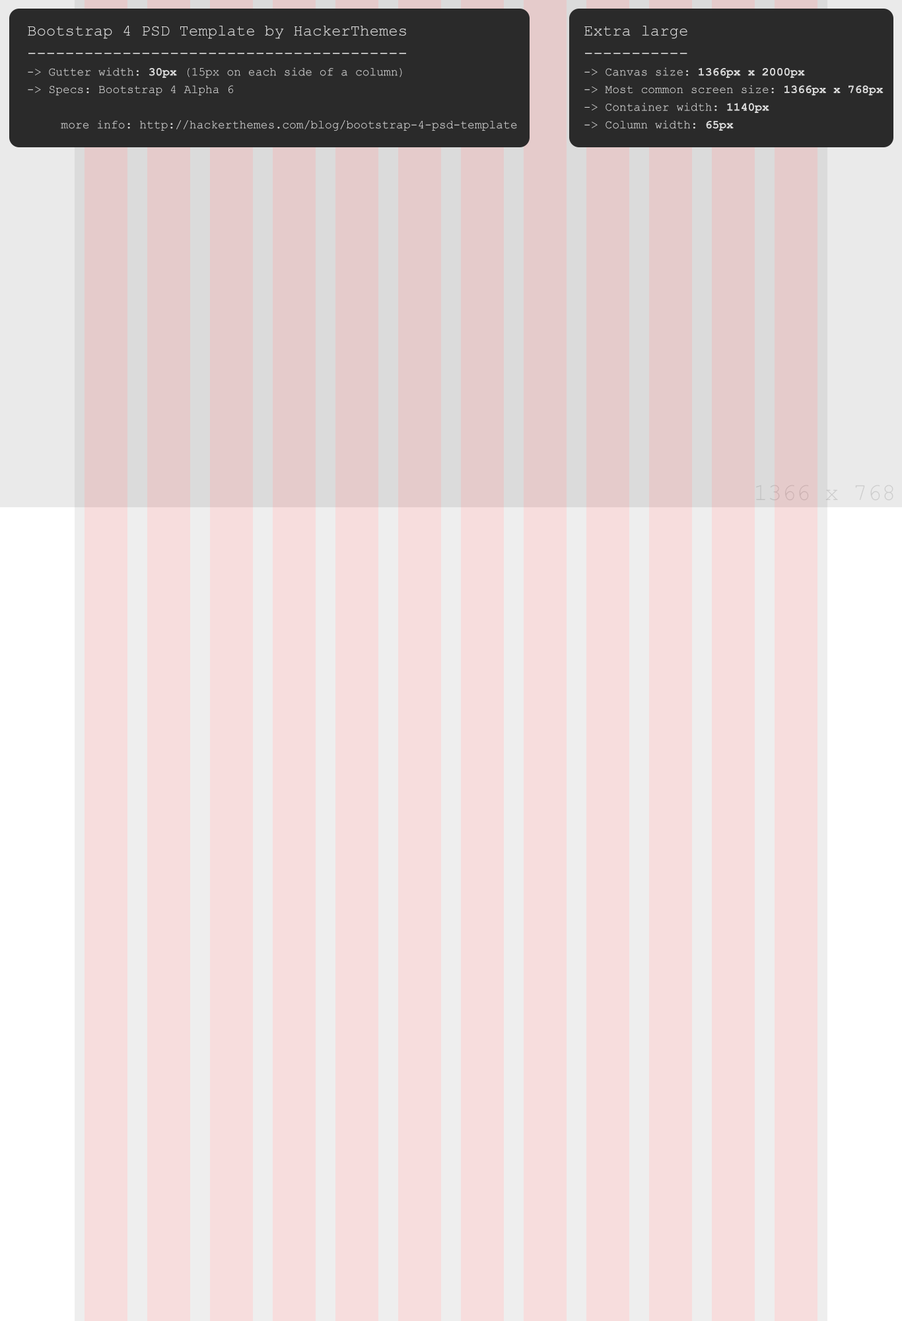
<style>
.page{position:relative;width:902px;height:1321px;background:#f7dddd}
.page>*{position:absolute;margin:0}
.t1{font:11.9px "CourierNewPSMT";color:#dedede}
.t2{font:15.9px "CourierNewPSMT";color:#dedede}
.t3{font:11.9px "CourierNewPS-BoldMT";color:#dedede}
.t4{font:23.8px "CourierNewPSMT"}
</style>
<div class="page">
<p class="t1" style="left:28px;top:26px;width:489px;height:105px"><span class="t2">Bootstrap 4 PSD Template by HackerThemes<br>----------------------------------------</span><br>-&gt; Gutter width: <span class="t3">30px </span>(15px on each side of a column)<br>-&gt; Specs: Bootstrap 4 Alpha 6<br><br>more info: http://hackerthemes.com/blog/bootstrap-4-psd-template</p>
<p class="t1" style="left:585px;top:26px;width:299px;height:105px"><span class="t2">Extra large<br>-----------</span><br>-&gt; Canvas size: <span class="t3">1366px x 2000px<br></span>-&gt; Most common screen size:<span class="t3"> 1366px x 768px<br></span>-&gt; Container width: <span class="t3">1140px</span><br>-&gt; Column width: <span class="t3">65px</span></p>
<p class="t4" style="left:756px;top:485px;width:138px;height:16px">1366 x 768</p>
</div>
